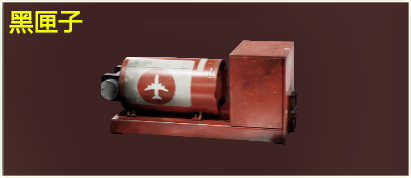
<style>
.page{position:relative;width:411px;height:178px}
.page>*{position:absolute;margin:0}
.t1{font:24px "MicrosoftYaHeiUI";color:#f4ff00;font-weight:bold}
</style>
<div class="page">
<p class="t1" style="left:9px;top:11px;width:74px;height:23px">黑匣子</p>
</div>
